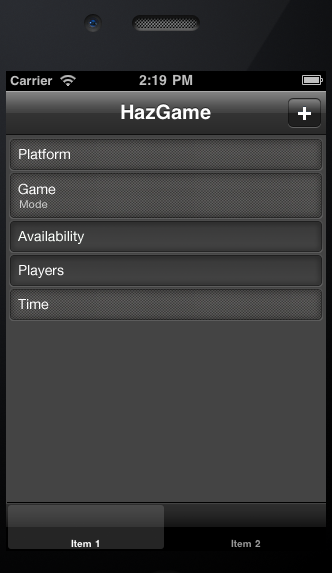
<style>
.page{position:relative;width:332px;height:573px;background:#444444}
.page>*{position:absolute;margin:0}
.t1{font:14px "HelveticaNeue";color:#ffffff}
.t2{font:11px "HelveticaNeue";color:#cecece}
.t3{font:14px "HelveticaNeue";color:#fbfffb}
</style>
<div class="page">
<p class="t1" style="left:19px;top:149px;width:51px;height:11px">Platform</p>
<p class="t1" style="left:18px;top:183px;width:38px;height:12px">Game</p>
<p class="t2" style="left:20px;top:200px;width:28px;height:8px">Mode</p>
<p class="t3" style="left:18px;top:231px;width:67px;height:13px">Availability</p>
<p class="t1" style="left:19px;top:265px;width:45px;height:13px">Players</p>
<p class="t1" style="left:18px;top:299px;width:31px;height:11px">Time</p>
</div>
